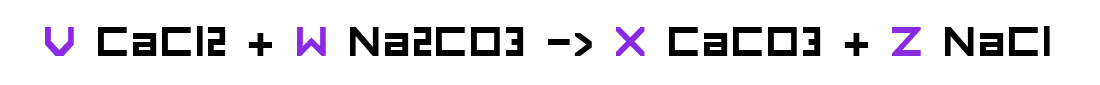
<style>
.page{position:relative;width:1100px;height:85px;background:#ffffff}
.page>*{position:absolute;margin:0}
.t1{font:55px "FORCED-SQUARE";color:#000000}
.t2{font:55px "FORCED-SQUARE";color:#8a2be2}
</style>
<div class="page">
<p class="t1" style="left:45px;top:26px;width:1005px;height:30px"><span class="t2">V</span> CaCl2 + <span class="t2">W </span>Na2CO3 -&gt; <span class="t2">X</span> CaCO3 + <span class="t2">Z </span>NaCl</p>
</div>
